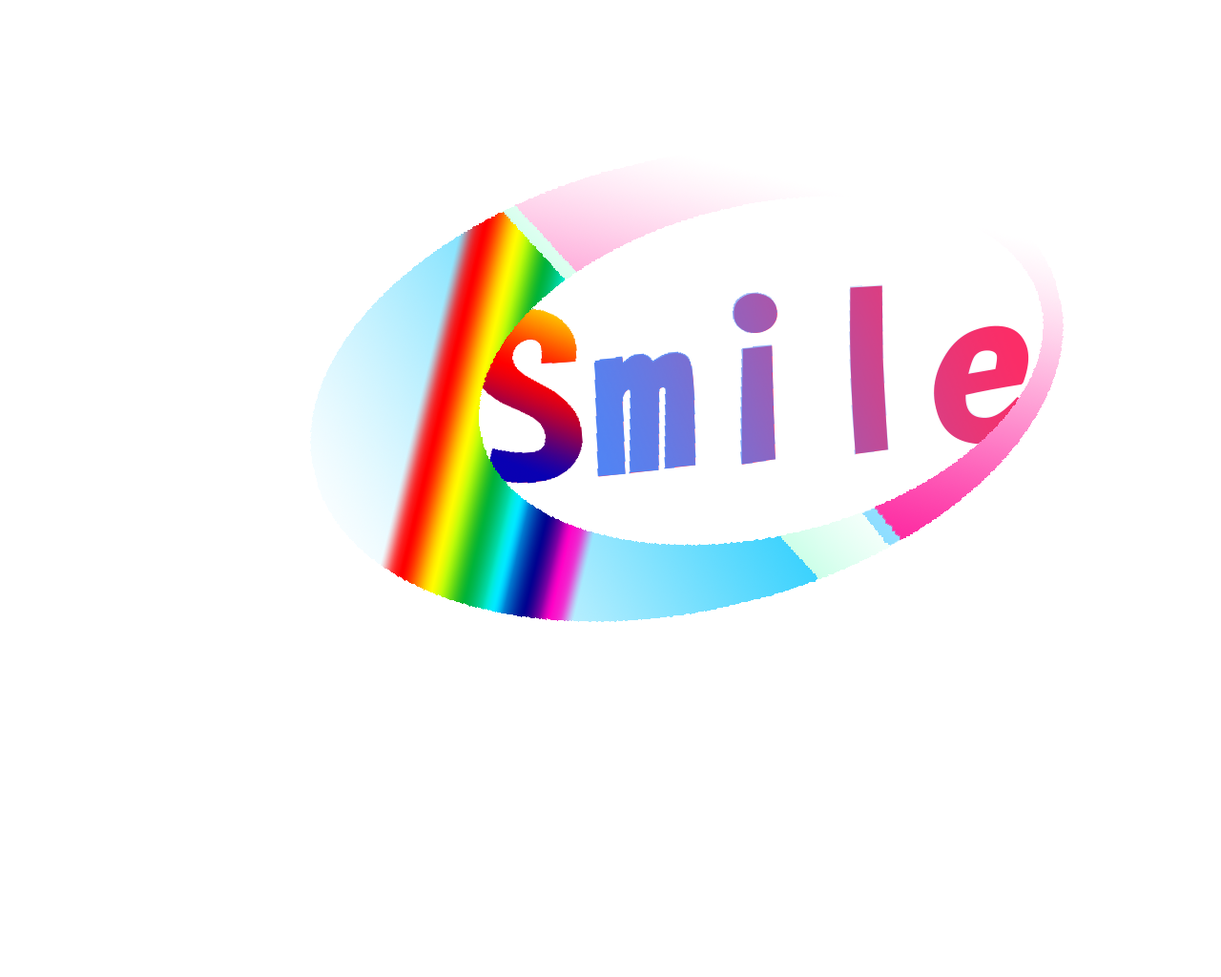
<style>
.page{position:relative;width:1221px;height:977px;background:#ffffff}
.page>*{position:absolute;margin:0}
.t1{font:211.5px "HGSoeiKakupoptai";scale:1.07 1}
</style>
<div class="page">
<p class="t1" style="left:474px;top:285px;width:561px;height:198px;rotate:-5deg">Smile</p>
</div>
